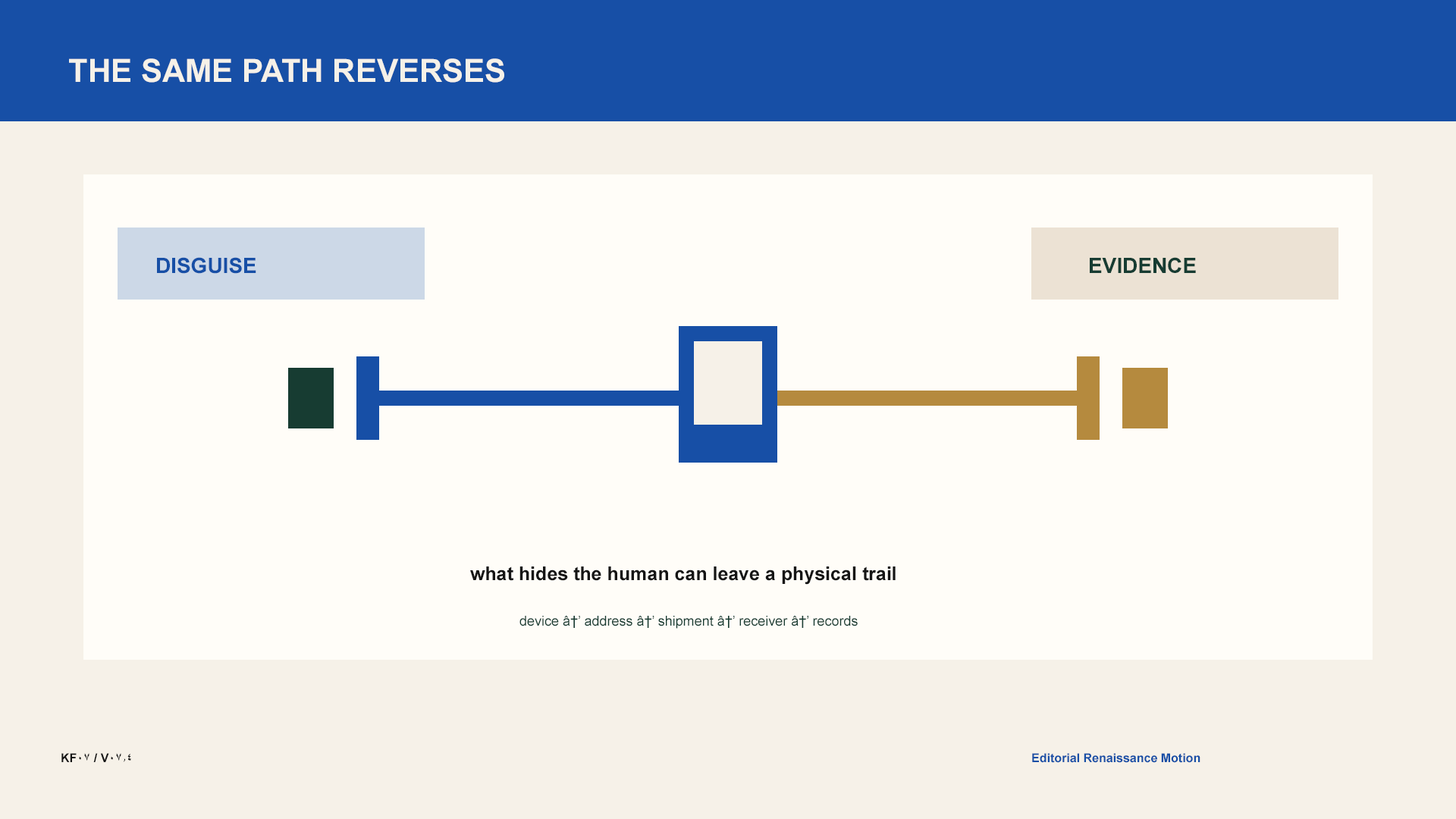
<style>
.page{position:relative;width:1456px;height:819px;background:#fffdf8}
.page>*{position:absolute;margin:0}
.t1{font:31.8px "Arial-BoldMT";color:#f6f1e8}
.t2{font:21.2px "Arial-BoldMT";color:#174fa6}
.t3{font:21.2px "Arial-BoldMT";color:#173c32}
.t4{font:19px "Arial-BoldMT";color:#151515}
.t5{font:13.6px "ArialMT";color:#173c32}
.t6{font:12.1px "Arial-BoldMT";color:#151515}
.t7{font:12.1px "Arial-BoldMT";color:#174fa6}
</style>
<div class="page">
<p class="t1" style="left:69px;top:58px;width:435px;height:25px">THE SAME PATH REVERSES</p>
<p class="t2" style="left:157px;top:257px;width:99px;height:17px">DISGUISE</p>
<p class="t3" style="left:1090px;top:257px;width:106px;height:16px">EVIDENCE</p>
<p class="t4" style="left:470px;top:566px;width:426px;height:19px">what hides the human can leave a physical trail</p>
<p class="t5" style="left:519px;top:616px;width:339px;height:13px">device â†’ address â†’ shipment â†’ receiver â†’ records</p>
<p class="t6" style="left:61px;top:753px;width:70px;height:9px">KF07 / V07.4</p>
<p class="t7" style="left:1032px;top:753px;width:168px;height:10px">Editorial Renaissance Motion</p>
</div>
